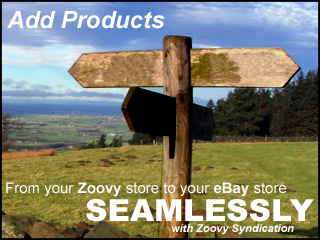
<style>
.page{position:relative;width:320px;height:240px}
.page>*{position:absolute;margin:0}
.t1{font:23.5px "Arial-BoldItalicMT";color:#ffffff}
.t2{font:14.7px "ArialMT";color:#ffffff}
.t3{font:14.7px "Arial-BoldMT";color:#ffffff}
.t4{font:30.4px "Arial-Black";color:#ffffff}
.t5{font:10.8px "Arial-BoldItalicMT";color:#ffffff}
</style>
<div class="page">
<p class="t1" style="left:7px;top:11px;width:158px;height:18px">Add Products</p>
<p class="t2" style="left:6px;top:182px;width:281px;height:15px">From your <span class="t3">Zoovy</span> store to your <span class="t3">eBay</span> store</p>
<p class="t4" style="left:86px;top:199px;width:228px;height:23px">SEAMLESSLY</p>
<p class="t5" style="left:172px;top:224px;width:122px;height:11px">with Zoovy Syndication</p>
</div>
